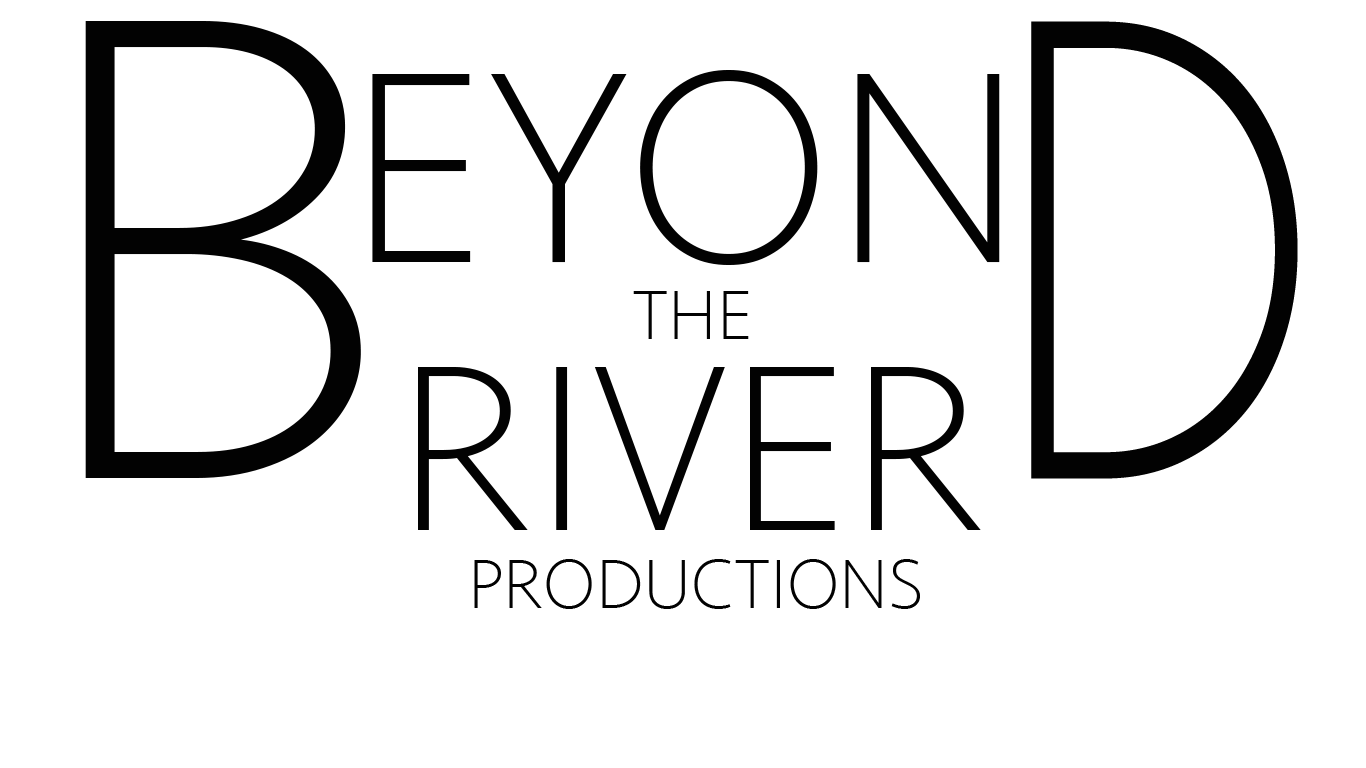
<style>
.page{position:relative;width:1366px;height:768px;background:#ffffff}
.page>*{position:absolute;margin:0}
.t1{font:685.7px "Seravek-ExtraLight";color:#020202}
.t2{font:685.7px "Seravek-ExtraLight";color:#020202;scale:0.74 1}
.t3{font:282.6px "Seravek-ExtraLight";color:#020202}
.t4{font:72px "Seravek-ExtraLight";color:#020202}
.t5{font:244.6px "Seravek-ExtraLight";color:#020202}
</style>
<div class="page">
<p class="t1" style="left:85px;top:21px;width:276px;height:457px">B</p>
<p class="t2" style="left:1031px;top:21px;width:267px;height:458px">D</p>
<p class="t3" style="left:372px;top:70px;width:628px;height:195px">EYON</p>
<p class="t4" style="left:633px;top:291px;width:116px;height:48px">THE</p>
<p class="t5" style="left:418px;top:367px;width:563px;height:163px">RIVER</p>
<p class="t4" style="left:474px;top:559px;width:446px;height:50px">PRODUCTIONS</p>
</div>
